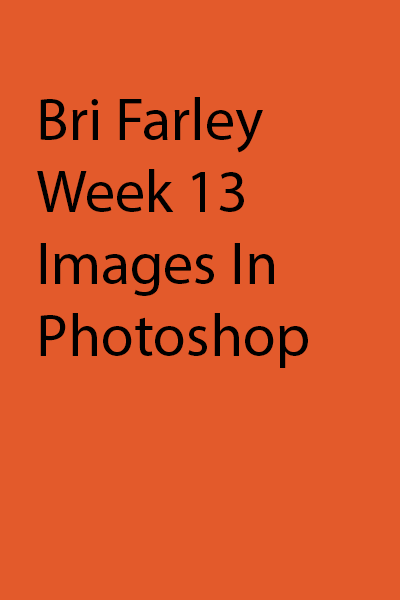
<style>
.page{position:relative;width:400px;height:600px;background:#e35a2b}
.page>*{position:absolute;margin:0}
.t1{font:60px "MyriadPro-Regular";color:#000000}
</style>
<div class="page">
<p class="t1" style="left:37px;top:97px;width:271px;height:271px">Bri Farley<br>Week 13 Images In Photoshop</p>
</div>
